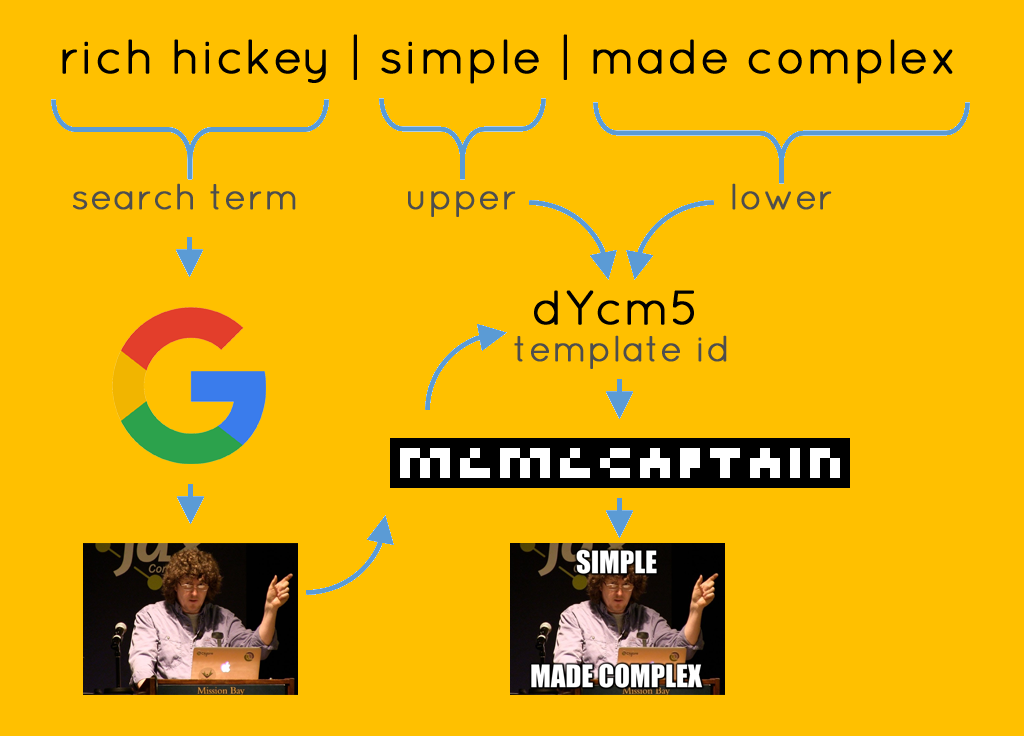
<style>
.page{position:relative;width:1024px;height:736px;background:#ffc000}
.page>*{position:absolute;margin:0}
.t1{font:48px "Quicksand-Regular";color:#000000;font-weight:bold}
.t2{font:36px "Quicksand-Regular";color:#4e4e4e;font-weight:bold}
</style>
<div class="page">
<p class="t1" style="left:62px;top:34px;width:891px;height:50px">rich hickey | simple | made complex</p>
<p class="t2" style="left:73px;top:183px;width:759px;height:34px">search term         upper                  lower</p>
<p class="t1" style="left:534px;top:290px;width:160px;height:35px">dYcm5</p>
<p class="t2" style="left:514px;top:335px;width:213px;height:34px">template id</p>
</div>
